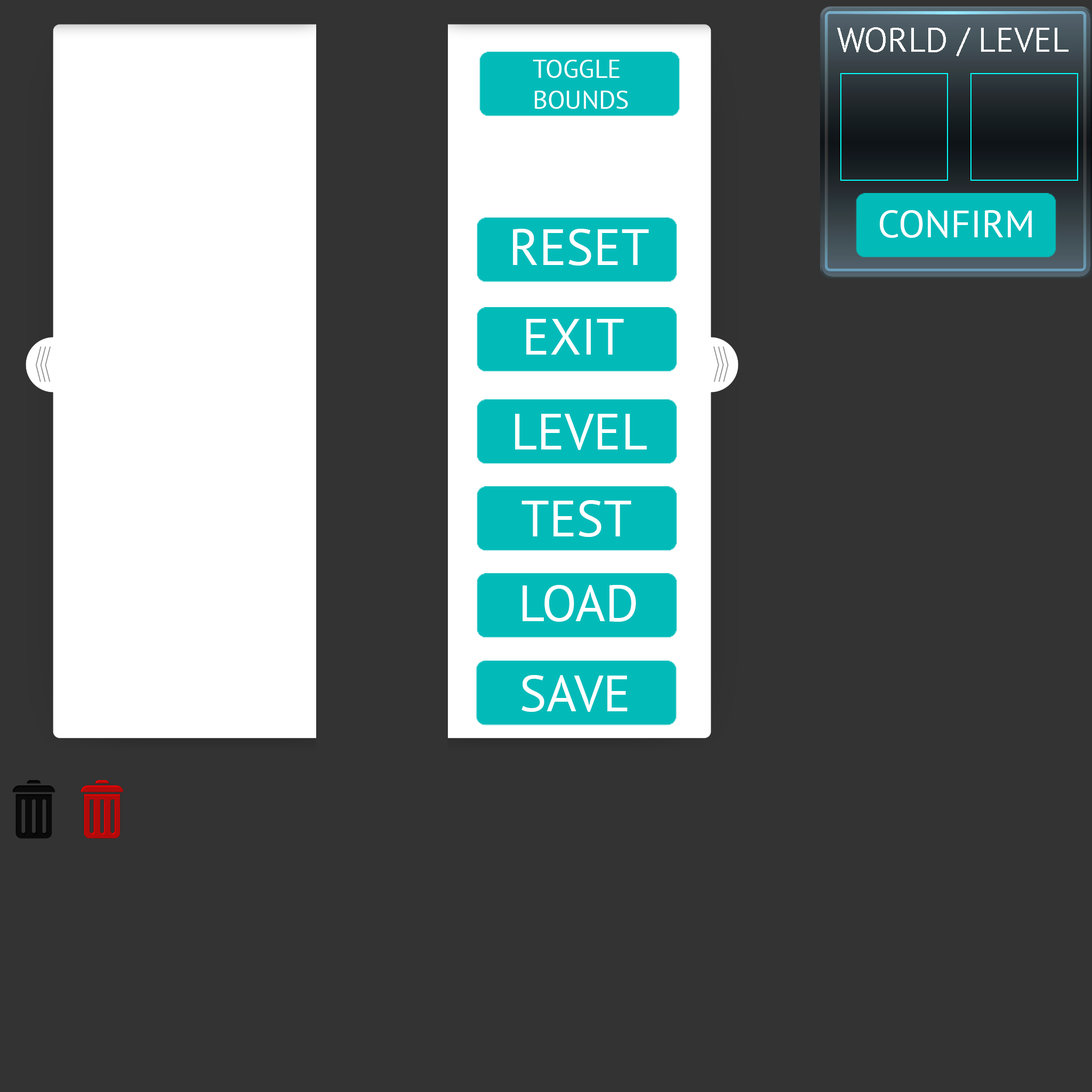
<style>
.page{position:relative;width:1092px;height:1092px;background:#333333}
.page>*{position:absolute;margin:0}
.t1{font:34.1px "PTSans-Regular";color:#ffffff}
.t2{font:25.6px "PTSans-Regular";color:#ffffff}
.t3{font:38.4px "PTSans-Regular";color:#ffffff}
.t4{font:51.2px "PTSans-Regular";color:#ffffff}
</style>
<div class="page">
<p class="t1" style="left:837px;top:27px;width:232px;height:30px">WORLD / LEVEL</p>
<p class="t2" style="left:533px;top:60px;width:95px;height:49px">TOGGLE<br>BOUNDS</p>
<p class="t3" style="left:880px;top:210px;width:152px;height:28px">CONFIRM</p>
<p class="t4" style="left:513px;top:229px;width:136px;height:37px">RESET</p>
<p class="t4" style="left:526px;top:319px;width:98px;height:36px">EXIT</p>
<p class="t4" style="left:515px;top:414px;width:132px;height:36px">LEVEL</p>
<p class="t4" style="left:521px;top:500px;width:110px;height:37px">TEST</p>
<p class="t4" style="left:523px;top:585px;width:113px;height:37px">LOAD</p>
<p class="t4" style="left:521px;top:675px;width:107px;height:37px">SAVE</p>
</div>
